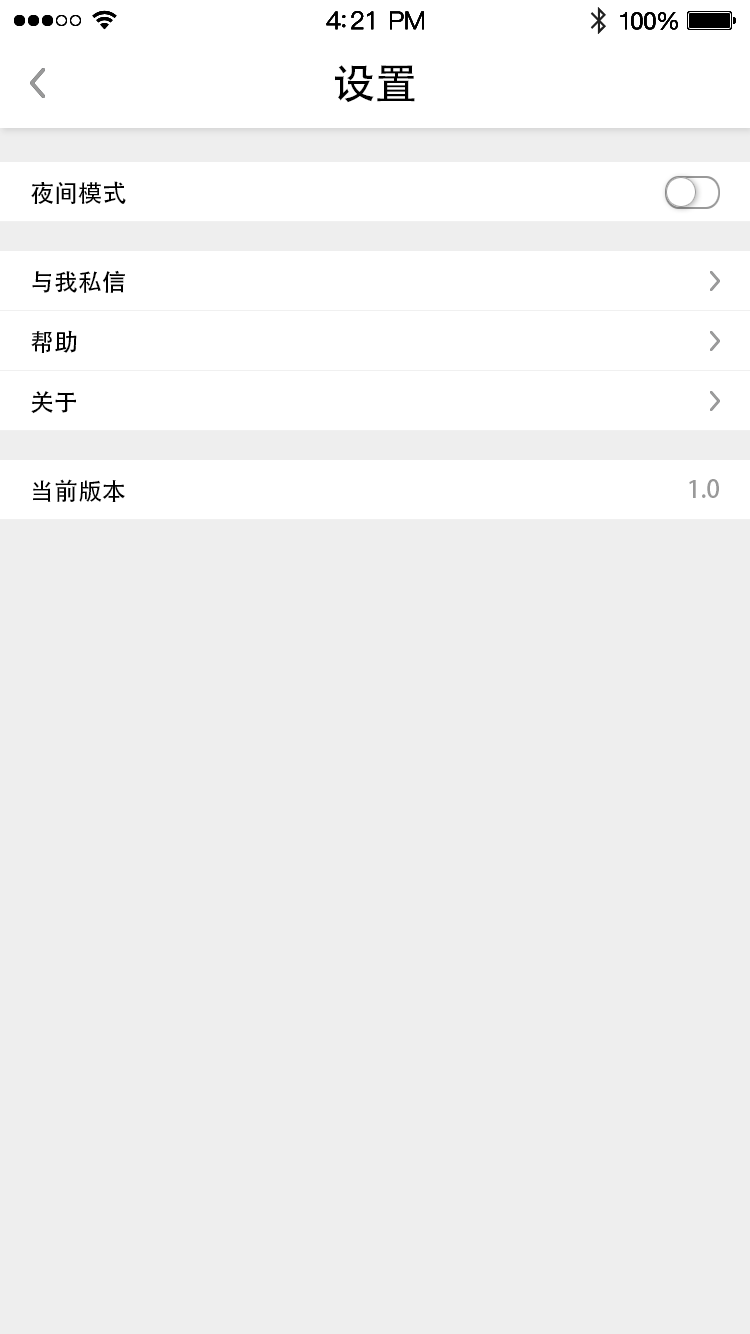
<style>
.page{position:relative;width:750px;height:1334px;background:#eeeeee}
.page>*{position:absolute;margin:0}
.t1{font:42px "AdobeHeitiStd-Regular";color:#000000}
.t2{font:24px "AdobeHeitiStd-Regular";color:#000000}
.t3{font:24px "AdobeHeitiStd-Regular";color:#999999}
</style>
<div class="page">
<p class="t1" style="left:335px;top:65px;width:80px;height:38px">设置</p>
<p class="t2" style="left:31px;top:181px;width:95px;height:24px">夜间模式</p>
<p class="t2" style="left:32px;top:270px;width:93px;height:23px">与我私信</p>
<p class="t2" style="left:31px;top:330px;width:46px;height:23px">帮助</p>
<p class="t2" style="left:31px;top:391px;width:45px;height:23px">关于</p>
<p class="t2" style="left:33px;top:479px;width:92px;height:23px">当前版本</p>
<p class="t3" style="left:689px;top:479px;width:30px;height:19px">1.0</p>
</div>
